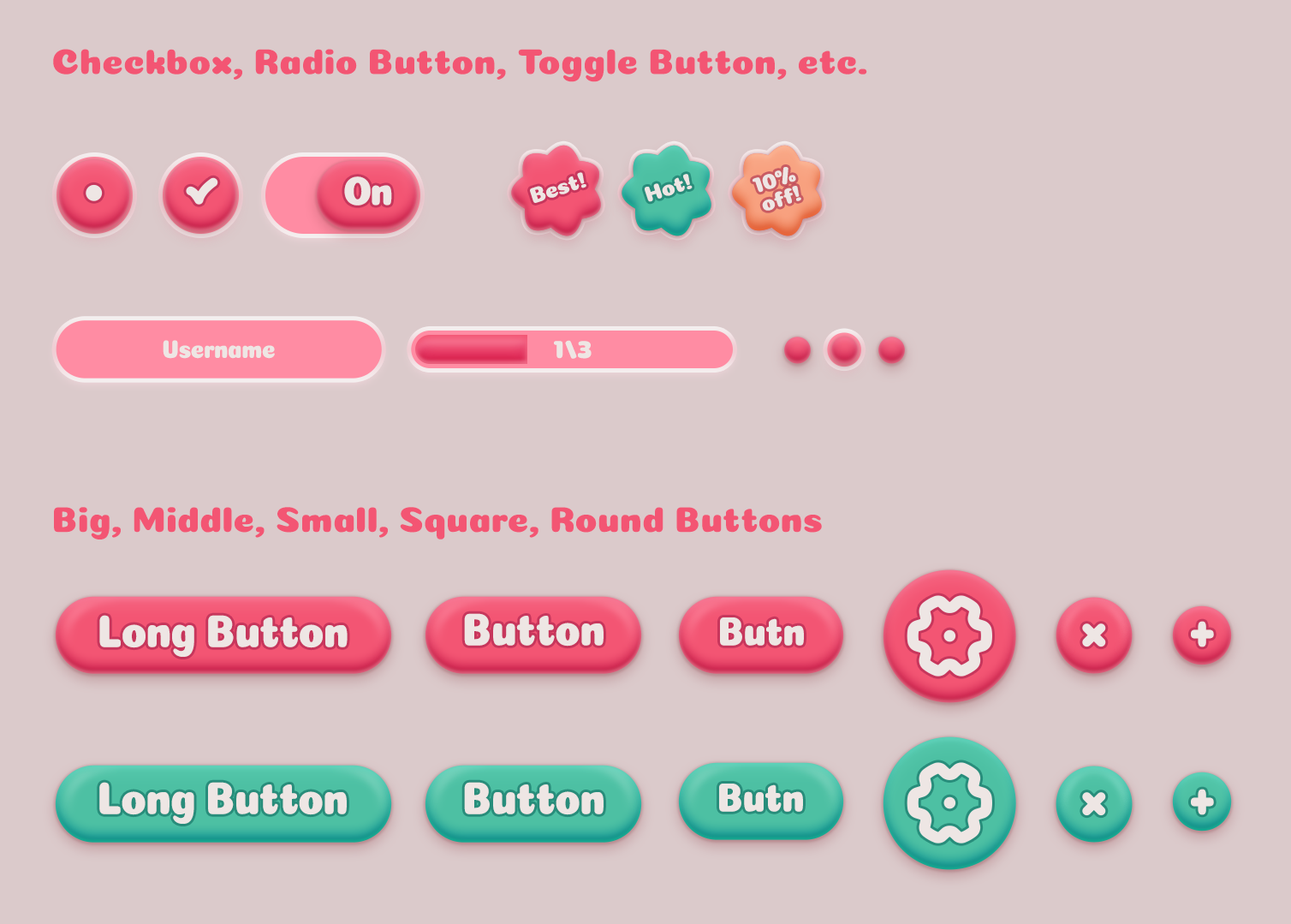
<style>
.page{position:relative;width:1291px;height:924px;background:#dbcacb}
.page>*{position:absolute;margin:0}
.t1{font:36px "Coiny-Regular";color:#f35573}
.t2{font:22.3px "Coiny-Regular";letter-spacing:-0.025em;color:#eee6e4}
.t3{font:41.1px "Coiny-Regular";letter-spacing:-0.05em;color:#eee6e4;scale:0.9 1}
.t4{font:25.7px "Coiny-Regular";letter-spacing:-0.025em;color:#eee6e4;scale:0.9 1}
.t5{font:25.7px "Coiny-Regular";letter-spacing:-0.025em;color:#eee6e4}
.t6{font:46.2px "Coiny-Regular";letter-spacing:-0.025em;color:#eee6e4;scale:0.9 1}
.t7{font:41.1px "Coiny-Regular";letter-spacing:-0.025em;color:#eee6e4;scale:0.9 1}
.t8{font:54.8px "Coiny-Regular";letter-spacing:-0.05em;color:#eee6e4;scale:0.9 1}
</style>
<div class="page">
<p class="t1" style="left:53px;top:49px;width:814px;height:33px">Checkbox, Radio Button, Toggle Button, etc.</p>
<p class="t2" style="left:530px;top:172px;width:56px;height:31px;rotate:-18deg">Best!</p>
<p class="t2" style="left:645px;top:174px;width:48px;height:28px;rotate:-18deg">Hot!</p>
<p class="t2" style="left:752px;top:167px;width:44px;height:26px;rotate:-18deg">10%</p>
<p class="t3" style="left:344px;top:176px;width:48px;height:29px">On</p>
<p class="t2" style="left:762px;top:186px;width:39px;height:25px;rotate:-18deg">off!</p>
<p class="t4" style="left:163px;top:340px;width:112px;height:19px">Username</p>
<p class="t5" style="left:554px;top:340px;width:38px;height:19px">1/3</p>
<p class="t1" style="left:54px;top:507px;width:768px;height:32px">Big, Middle, Small, Square, Round Buttons</p>
<p class="t6" style="left:99px;top:615px;width:249px;height:42px">Long Button</p>
<p class="t6" style="left:464px;top:613px;width:140px;height:33px">Button</p>
<p class="t7" style="left:720px;top:617px;width:84px;height:28px">Butn</p>
<p class="t8" style="left:1191px;top:621px;width:23px;height:26px">+</p>
<p class="t6" style="left:99px;top:782px;width:248px;height:42px">Long Button</p>
<p class="t6" style="left:464px;top:782px;width:140px;height:33px">Button</p>
<p class="t7" style="left:719px;top:783px;width:84px;height:29px">Butn</p>
<p class="t8" style="left:1191px;top:788px;width:23px;height:27px">+</p>
</div>
